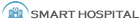
<style>
.page{position:relative;width:140px;height:21px;background:#ffffff}
.page>*{position:absolute;margin:0}
.t1{font:11px "CopperplateGothic-Bold";color:#5a5757}
</style>
<div class="page">
<p class="t1" style="left:31px;top:10px;width:108px;height:9px">SMART HOSPITAL</p>
</div>
